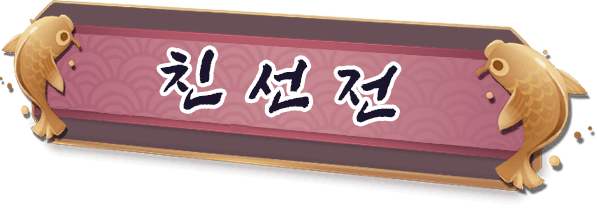
<style>
.page{position:relative;width:597px;height:208px;background:#ffffff}
.page>*{position:absolute;margin:0}
.t1{font:74px "SangSangRockOTF";letter-spacing:0.34em;color:#1b142d}
.t2{font:74px "SangSangRockOTF";letter-spacing:0.38em;color:#1b142d}
</style>
<div class="page">
<p class="t1" style="left:160px;top:49px;width:238px;height:74px;rotate:5deg">친선<span class="t2">전</span></p>
</div>
